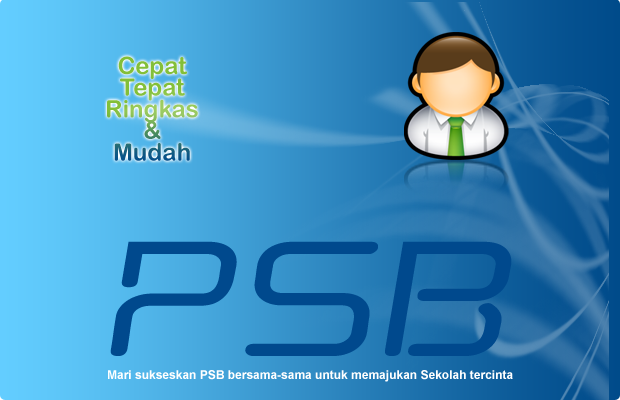
<style>
.page{position:relative;width:620px;height:400px}
.page>*{position:absolute;margin:0}
.t1{font:24px/21.6px "ArialRoundedMTBold"}
.t2{font:188.4px "AunchantedExpandedBoldOblique";color:#00498d;scale:0.81 1}
.t3{font:12px "Arial-BoldMT";color:#ffffff}
</style>
<div class="page">
<p class="t1" style="left:107px;top:56px;width:91px;height:105px;text-align:center">Cepat<br>Tepat<br>Ringkas<br>&amp;<br>Mudah</p>
<p class="t2" style="left:110px;top:241px;width:402px;height:115px">PSB</p>
<p class="t3" style="left:108px;top:370px;width:405px;height:12px">Mari sukseskan PSB bersama-sama untuk memajukan Sekolah tercinta</p>
</div>
